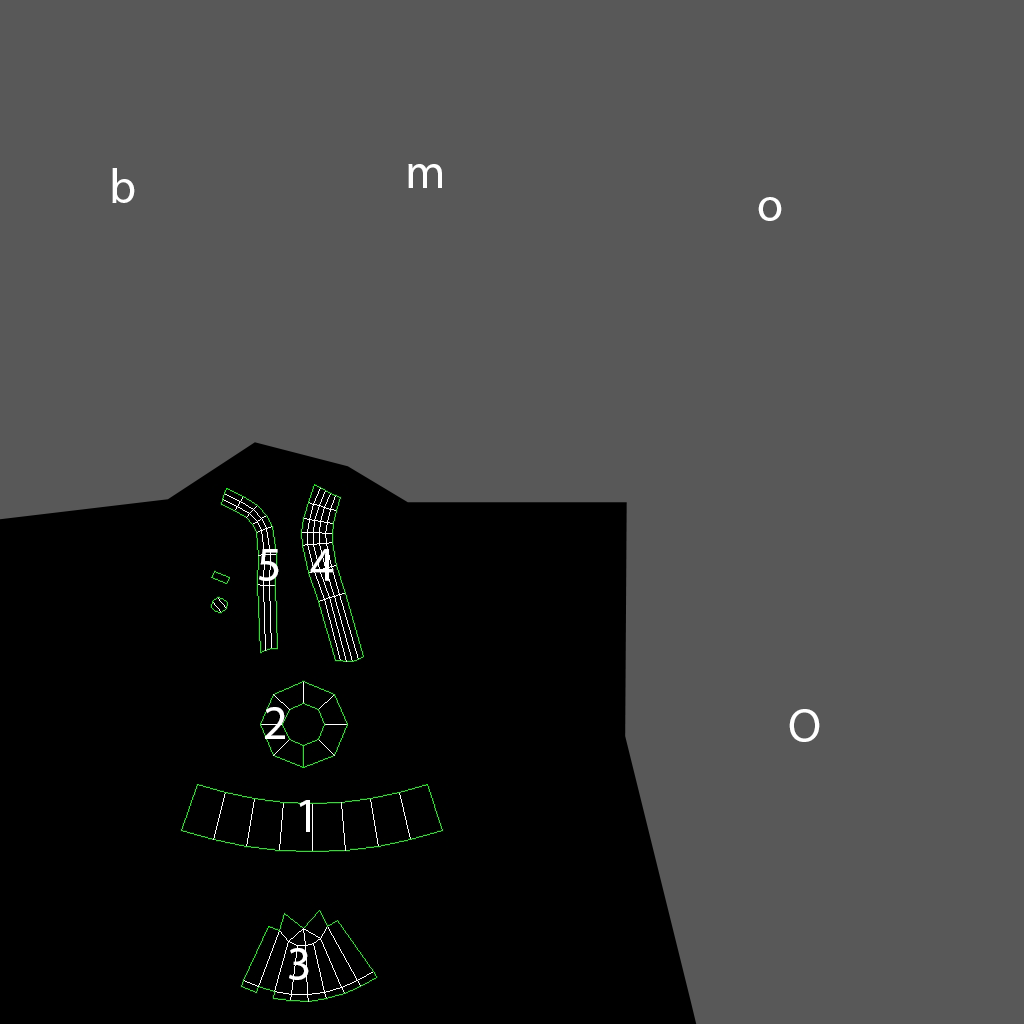
<style>
.page{position:relative;width:1024px;height:1024px;background:#585858}
.page>*{position:absolute;margin:0}
.t1{font:48px "MyriadHebrew-Regular";letter-spacing:0.1em;color:#ffffff}
</style>
<div class="page">
<p class="t1" style="left:112px;top:168px;width:23px;height:35px">b</p>
<p class="t1" style="left:408px;top:164px;width:34px;height:24px">m</p>
<p class="t1" style="left:758px;top:197px;width:24px;height:24px">o</p>
<p class="t1" style="left:259px;top:549px;width:20px;height:32px">5</p>
<p class="t1" style="left:310px;top:549px;width:24px;height:32px">4</p>
<p class="t1" style="left:265px;top:707px;width:20px;height:32px">2</p>
<p class="t1" style="left:789px;top:709px;width:31px;height:33px">O</p>
<p class="t1" style="left:299px;top:800px;width:11px;height:32px">1</p>
<p class="t1" style="left:289px;top:948px;width:20px;height:32px">3</p>
</div>
